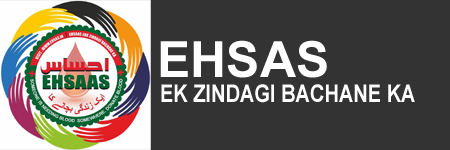
<style>
.page{position:relative;width:450px;height:150px;background:#333333}
.page>*{position:absolute;margin:0}
.t1{font:50px "Arial-BoldMT";color:#ffffff}
.t2{font:24.2px "Arial-BoldMT";color:#ffffff;scale:0.83 1}
</style>
<div class="page">
<p class="t1" style="left:160px;top:40px;width:167px;height:38px">EHSAS</p>
<p class="t2" style="left:161px;top:84px;width:254px;height:19px">EK ZINDAGI BACHANE KA</p>
</div>
